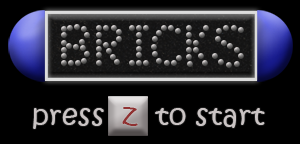
<style>
.page{position:relative;width:300px;height:144px;background:#000000}
.page>*{position:absolute;margin:0}
.t1{font:27.7px "KristenITC-Regular";letter-spacing:0.025em;color:#cac4c4}
.t2{font:27.7px "KristenITC-Regular";letter-spacing:0.025em;color:#903232}
</style>
<div class="page">
<p class="t1" style="left:33px;top:107px;width:232px;height:22px">press  <span class="t2">z</span>  to start</p>
</div>
